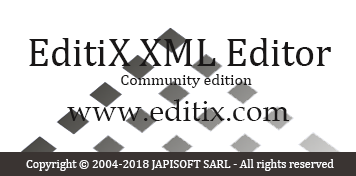
<style>
.page{position:relative;width:356px;height:176px;background:#ffffff}
.page>*{position:absolute;margin:0}
.t1{font:40px "Cambria";color:#191717}
.t2{font:16px "Cambria";color:#191717}
.t3{font:30px "BookAntiqua";color:#191717}
.t4{font:12px "Cambria";color:#fdfdff}
</style>
<div class="page">
<p class="t1" style="left:29px;top:38px;width:302px;height:50px;text-align:center">EditiX XML Editor <br><span class="t2">Community edition</span></p>
<p class="t3" style="left:67px;top:99px;width:222px;height:22px">www.editix.com</p>
<p class="t4" style="left:26px;top:159px;width:308px;height:12px">Copyright © 2004-2018 JAPISOFT SARL - All rights reserved</p>
</div>
